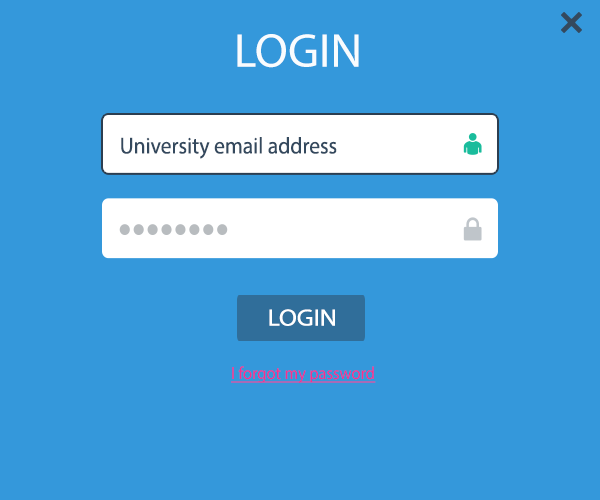
<style>
.page{position:relative;width:600px;height:500px;background:#3498db}
.page>*{position:absolute;margin:0}
.t1{font:48px "MyriadPro-Regular";color:#f9fcfe}
.t2{font:23.1px "MyriadPro-Regular";color:#34495e;scale:0.93 1}
.t3{font:23.5px "MyriadPro-Regular";color:#ffffff;scale:1.1 1}
.t4{font:17.7px "MyriadPro-Regular";color:#f72e8d;text-decoration:underline;scale:0.93 1}
</style>
<div class="page">
<p class="t1" style="left:237px;top:34px;width:122px;height:34px">LOGIN</p>
<p class="t2" style="left:121px;top:137px;width:216px;height:22px">University email address</p>
<p class="t3" style="left:269px;top:309px;width:66px;height:17px">LOGIN</p>
<p class="t4" style="left:231px;top:366px;width:145px;height:17px">I forgot my password</p>
</div>
